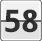
<style>
.page{position:relative;width:42px;height:41px;background:#f1f1f1}
.page>*{position:absolute;margin:0}
.t1{font:31px "DroidSans-Bold";letter-spacing:0.02em;color:#303030}
</style>
<div class="page">
<p class="t1" style="left:5px;top:9px;width:33px;height:24px">58</p>
</div>
